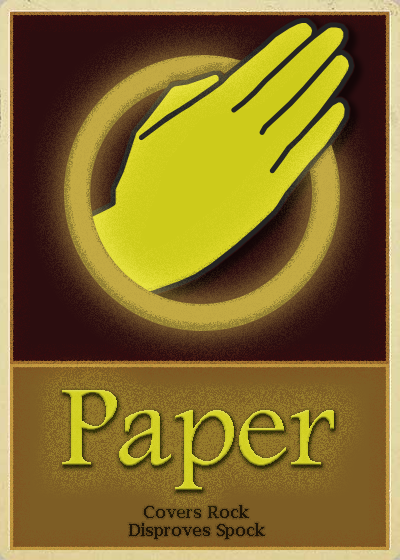
<style>
.page{position:relative;width:400px;height:560px}
.page>*{position:absolute;margin:0}
.t1{font:120px "FootlightMTLight";color:#d2d027}
.t2{font:16px/18px "LucidaBright-Demi";color:#1e1507}
</style>
<div class="page">
<p class="t1" style="left:62px;top:390px;width:272px;height:100px">Paper</p>
<p class="t2" style="left:129px;top:505px;width:136px;height:34px;text-align:center">Covers Rock<br>Disproves Spock</p>
</div>
